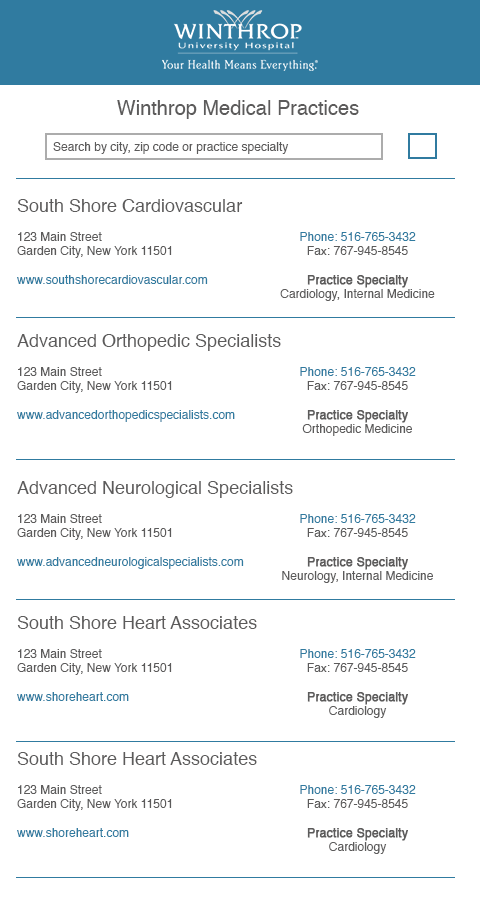
<style>
.page{position:relative;width:480px;height:900px;background:#ffffff}
.page>*{position:absolute;margin:0}
.t1{font:20px "Helvetica";color:#5c5b5b}
.t2{font:12px "Helvetica";color:#5c5b5b}
.t3{font:18px "Helvetica";color:#5c5b5b}
.t4{font:12px "Helvetica";color:#307ba0}
.t5{font:12px "Helvetica";color:#5c5b5b;font-weight:bold}
</style>
<div class="page">
<p class="t1" style="left:117px;top:100px;width:242px;height:19px">Winthrop Medical Practices</p>
<p class="t2" style="left:53px;top:142px;width:236px;height:12px">Search by city, zip code or practice specialty</p>
<p class="t2" style="left:17px;top:199px;width:226px;height:85px"><span class="t3">South Shore Cardiovascular <br></span><br>123 Main Street<br>Garden City, New York 11501<br><br><span class="t4">www.southshorecardiovascular.com</span></p>
<p class="t2" style="left:280px;top:232px;width:155px;height:69px;text-align:center"><span class="t4">Phone: 516-765-3432<br></span>Fax: 767-945-8545<br><br><span class="t5">Practice Specialty<br></span>Cardiology, Internal Medicine</p>
<p class="t2" style="left:17px;top:334px;width:264px;height:88px"><span class="t3">Advanced Orthopedic Specialists<br></span><br>123 Main Street<br>Garden City, New York 11501<br><br><span class="t4">www.advancedorthopedicspecialists.com</span></p>
<p class="t4" style="left:300px;top:367px;width:116px;height:69px;text-align:center">Phone: 516-765-3432<br><span class="t2">Fax: 767-945-8545<br><br></span><span class="t5">Practice Specialty<br></span><span class="t2">Orthopedic Medicine</span></p>
<p class="t2" style="left:17px;top:481px;width:276px;height:88px"><span class="t3">Advanced Neurological Specialists<br></span><br>123 Main Street<br>Garden City, New York 11501<br><br><span class="t4">www.advancedneurologicalspecialists.com</span></p>
<p class="t2" style="left:282px;top:514px;width:151px;height:69px;text-align:center"><span class="t4">Phone: 516-765-3432<br></span>Fax: 767-945-8545<br><br><span class="t5">Practice Specialty<br></span>Neurology, Internal Medicine</p>
<p class="t2" style="left:17px;top:616px;width:240px;height:85px"><span class="t3">South Shore Heart Associates<br></span><br>123 Main Street<br>Garden City, New York 11501<br><br><span class="t4">www.shoreheart.com</span></p>
<p class="t4" style="left:300px;top:649px;width:116px;height:69px;text-align:center">Phone: 516-765-3432<br><span class="t2">Fax: 767-945-8545<br><br></span><span class="t5">Practice Specialty<br></span><span class="t2">Cardiology</span></p>
<p class="t2" style="left:17px;top:752px;width:240px;height:85px"><span class="t3">South Shore Heart Associates<br></span><br>123 Main Street<br>Garden City, New York 11501<br><br><span class="t4">www.shoreheart.com</span></p>
<p class="t4" style="left:300px;top:785px;width:116px;height:69px;text-align:center">Phone: 516-765-3432<br><span class="t2">Fax: 767-945-8545<br><br></span><span class="t5">Practice Specialty<br></span><span class="t2">Cardiology</span></p>
</div>
